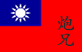
<style>
.page{position:relative;width:82px;height:52px;background:#fe0000}
.page>*{position:absolute;margin:0}
.t1{font:17.9px/16.3px "AdobeKaitiStd-Regular";color:#282828;font-weight:bold;scale:1.05 1}
</style>
<div class="page">
<p class="t1" style="left:57px;top:16px;width:18px;height:30px">炮<br>兄</p>
</div>
